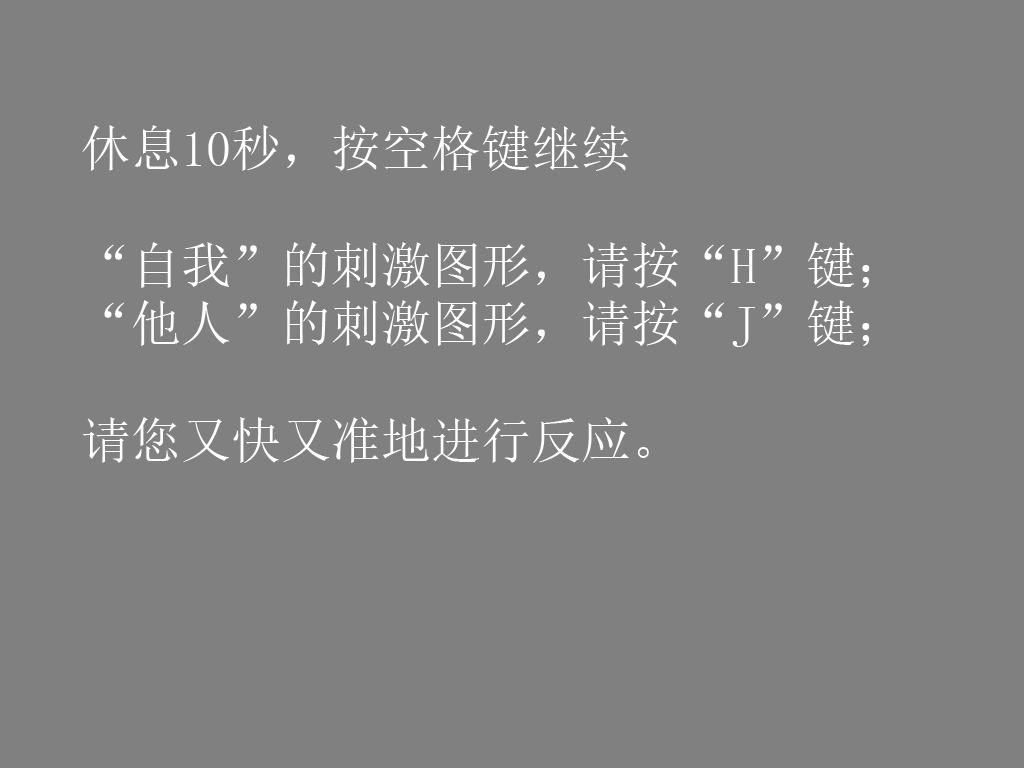
<style>
.page{position:relative;width:1024px;height:768px;background:#808080}
.page>*{position:absolute;margin:0}
.t1{font:50px/58.3px "SimSun";color:#ffffff}
</style>
<div class="page">
<p class="t1" style="left:82px;top:125px;width:788px;height:338px">休息10秒，按空格键继续<br><br>“自我”的刺激图形，请按“H”键；<br>“他人”的刺激图形，请按“J”键；<br><br>请您又快又准地进行反应。</p>
</div>
